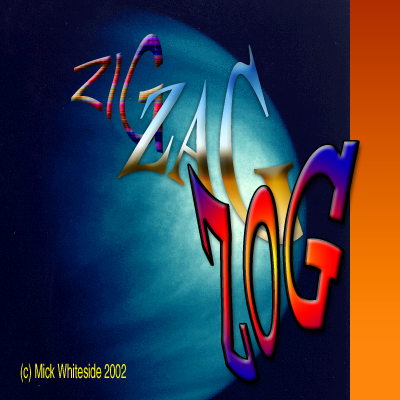
<style>
.page{position:relative;width:400px;height:400px}
.page>*{position:absolute;margin:0}
.t1{font:120px "Helvetica";scale:0.5 1}
.t2{font:216px "TimesNewRomanPS-BoldMT";scale:0.33 1}
.t3{font:360px "Courier-Bold";scale:0.2 1}
.t4{font:20px "Helvetica";color:#fff600;scale:0.5 1}
</style>
<div class="page">
<p class="t1" style="left:71px;top:33px;width:93px;height:121px">ZIG</p>
<p class="t2" style="left:117px;top:44px;width:186px;height:200px">ZAG</p>
<p class="t3" style="left:188px;top:141px;width:171px;height:242px">ZOG</p>
<p class="t4" style="left:20px;top:363px;width:106px;height:20px">(c) Mick Whiteside 2002</p>
</div>
